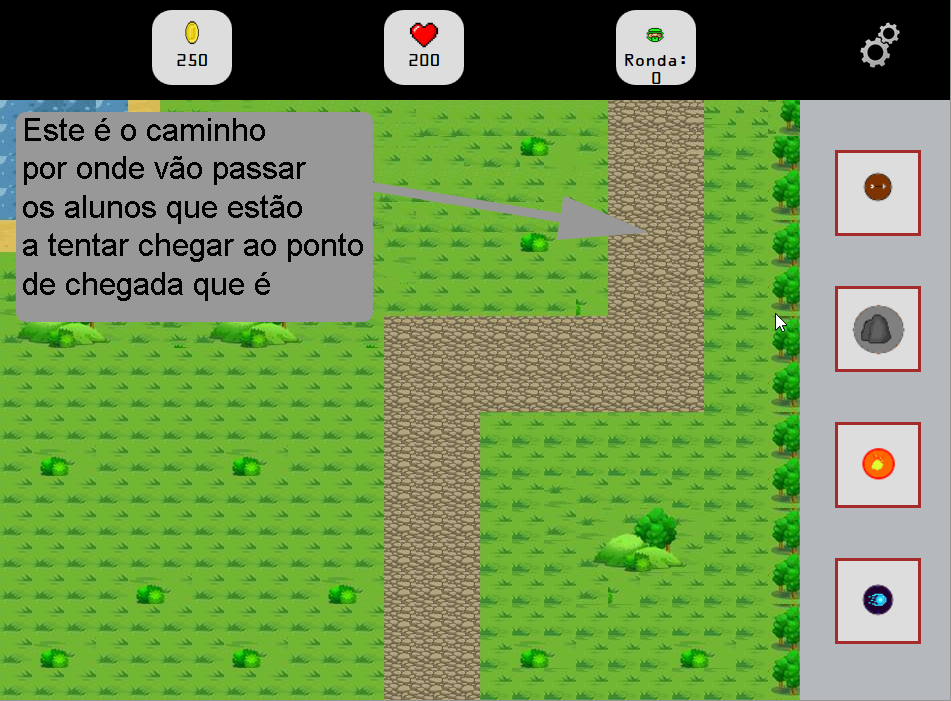
<style>
.page{position:relative;width:951px;height:701px}
.page>*{position:absolute;margin:0}
.t1{font:32px "ArialMT";color:#000000}
</style>
<div class="page">
<p class="t1" style="left:23px;top:118px;width:340px;height:183px">Este é o caminho<br>por onde vão passar<br>os alunos que estão<br>a tentar chegar ao ponto<br>de chegada que é</p>
</div>
